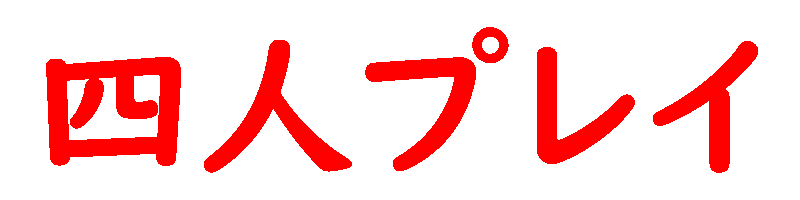
<style>
.page{position:relative;width:800px;height:200px;background:#ffffff}
.page>*{position:absolute;margin:0}
.t1{font:161.6px "UDDigiKyokashoNK-B";color:#ff0000}
</style>
<div class="page">
<p class="t1" style="left:46px;top:27px;width:712px;height:146px">四人プレイ</p>
</div>
